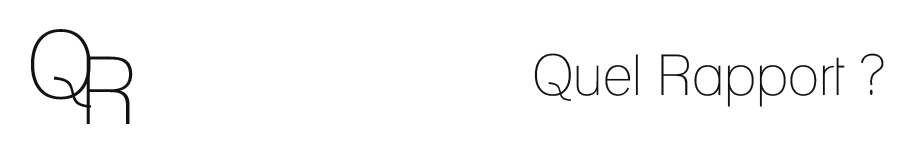
<style>
.page{position:relative;width:900px;height:150px;background:#ffffff}
.page>*{position:absolute;margin:0}
.t1{font:93.8px "Lane-Narrow";color:#111111}
.t2{font:56.2px "Lane-Narrow";color:#111111}
</style>
<div class="page">
<p class="t1" style="left:31px;top:29px;width:61px;height:79px">Q</p>
<p class="t2" style="left:534px;top:53px;width:350px;height:54px">Quel Rapport ?</p>
<p class="t1" style="left:86px;top:56px;width:47px;height:68px">R</p>
</div>
